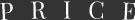
<style>
.page{position:relative;width:135px;height:20px;background:#333333}
.page>*{position:absolute;margin:0}
.t1{font:24px "PlayfairDisplay-Regular";letter-spacing:0.7em;color:#ffffff;text-transform:uppercase}
</style>
<div class="page">
<p class="t1" style="left:0px;top:1px;width:136px;height:20px">price</p>
</div>
